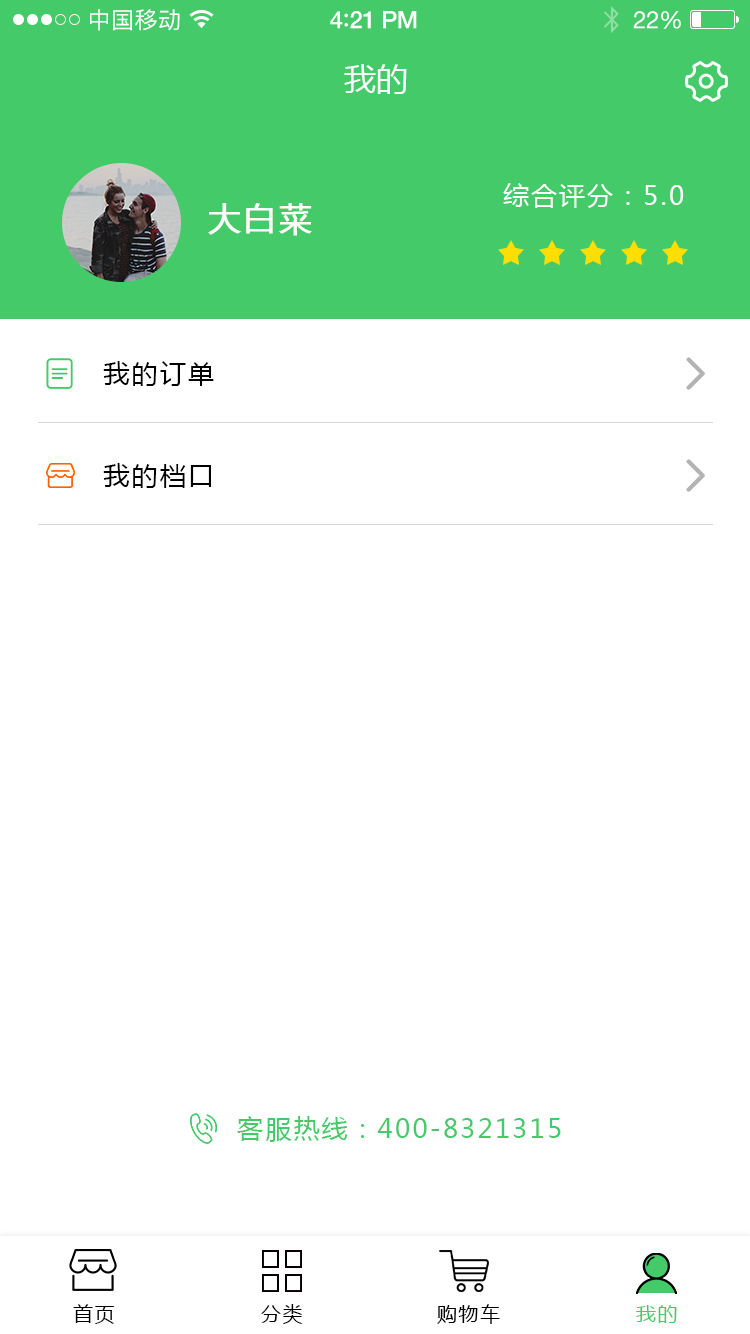
<style>
.page{position:relative;width:750px;height:1334px;background:#ffffff}
.page>*{position:absolute;margin:0}
.t1{font:23px "PingFangSC-Regular";letter-spacing:0.02em;color:#ffffff}
.t2{font:24px "HelveticaNeue-Medium";letter-spacing:-0.02em;color:#ffffff}
.t3{font:26px "Avenir-Medium";letter-spacing:-0.02em;color:#ffffff}
.t4{font:24px "HelveticaNeue";letter-spacing:-0.02em;color:#ffffff}
.t5{font:32px "MicrosoftYaHei";color:#ffffff;text-transform:uppercase}
.t6{font:26px "MicrosoftYaHei";letter-spacing:0.08em;color:#ffffff;text-transform:uppercase}
.t7{font:32px "MicrosoftYaHei";letter-spacing:0.08em;color:#ffffff;text-transform:uppercase;font-weight:bold}
.t8{font:26px "MicrosoftYaHei";letter-spacing:0.08em;color:#000000;text-transform:uppercase}
.t9{font:26px "MicrosoftYaHei";letter-spacing:0.08em;color:#44ca68;text-transform:uppercase}
.t10{font:20px "MicrosoftYaHei";letter-spacing:0.08em;color:#000000;text-transform:uppercase}
.t11{font:20px "MicrosoftYaHei";letter-spacing:0.08em;color:#44ca68;text-transform:uppercase}
</style>
<div class="page">
<p class="t1" style="left:90px;top:9px;width:90px;height:22px">中国移动</p>
<p class="t2" style="left:330px;top:11px;width:87px;height:18px">4<span class="t3">:</span>21 PM</p>
<p class="t4" style="left:633px;top:11px;width:48px;height:18px">22%</p>
<p class="t5" style="left:344px;top:64px;width:63px;height:30px">我的</p>
<p class="t6" style="left:503px;top:183px;width:181px;height:25px">综合评分：5.0</p>
<p class="t7" style="left:208px;top:203px;width:104px;height:33px">大白菜</p>
<p class="t8" style="left:103px;top:361px;width:111px;height:25px">我的订单</p>
<p class="t8" style="left:103px;top:463px;width:108px;height:25px">我的档口</p>
<p class="t9" style="left:237px;top:1116px;width:324px;height:26px">客服热线：400-8321315</p>
<p class="t10" style="left:73px;top:1304px;width:41px;height:20px">首页</p>
<p class="t10" style="left:261px;top:1304px;width:42px;height:20px">分类</p>
<p class="t10" style="left:437px;top:1304px;width:63px;height:20px">购物车</p>
<p class="t11" style="left:636px;top:1305px;width:41px;height:18px">我的</p>
</div>
